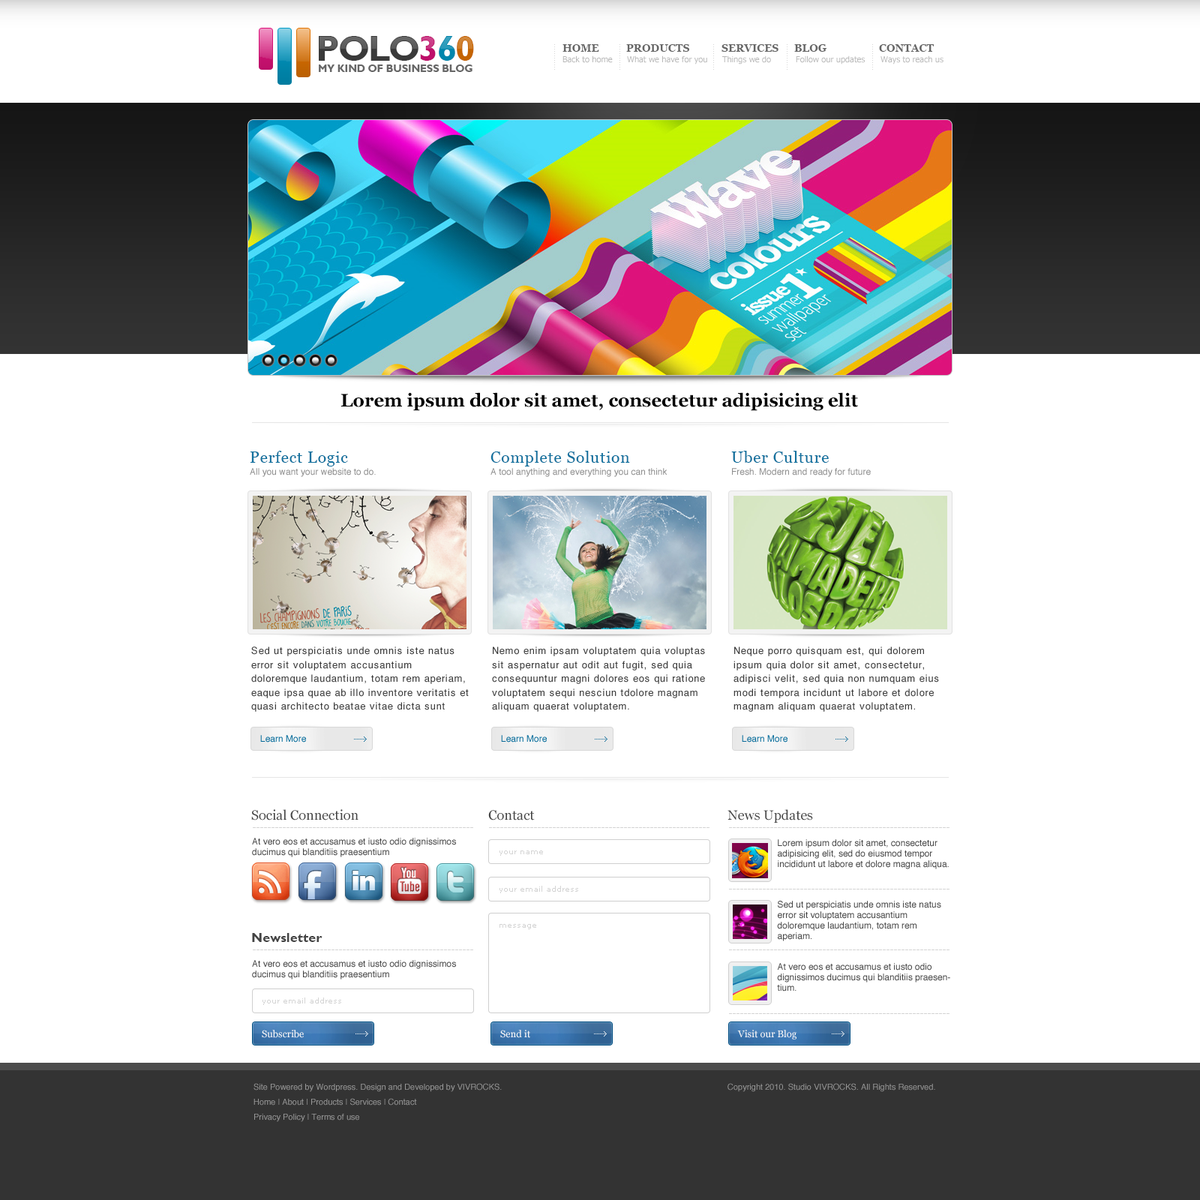
<style>
.page{position:relative;width:1200px;height:1200px;background:#ffffff}
.page>*{position:absolute;margin:0}
.t1{font:36px "GillSansMT-Bold";letter-spacing:-0.04em}
.t2{font:10.5px "Georgia-Bold";color:#666666}
.t3{font:10.3px "GillSansMT-Bold";color:#666666}
.t4{font:8.2px "Tahoma";color:#b7b7b7}
.t5{font:18px "Georgia-Bold";color:#000000}
.t6{font:15.8px "Georgia";letter-spacing:0.04em;color:#11719e}
.t7{font:9px "Helvetica";color:#8c8c8c}
.t8{font:9.8px/13.8px "Helvetica";letter-spacing:0.06em;color:#3e3e3e}
.t9{font:9px "Helvetica";color:#016999}
.t10{font:13.5px "Georgia";color:#444444}
.t11{font:9px "Verdana";color:#d3d3d3}
.t12{font:9px/10.5px "Helvetica";color:#444444}
.t13{font:7.5px "Verdana";color:#d4d4d4}
.t14{font:13.5px "GillSansMT-Bold";color:#444444}
.t15{font:9.8px "Georgia";color:#ffffff}
.t16{font:8.2px/7.5px "Helvetica";color:#999999}
.t17{font:8.2px "Helvetica";color:#999999}
</style>
<div class="page">
<p class="t1" style="left:319px;top:36px;width:155px;height:25px">POLO360</p>
<p class="t2" style="left:562px;top:44px;width:37px;height:8px">HOME</p>
<p class="t2" style="left:626px;top:44px;width:63px;height:8px">PRODUCTS</p>
<p class="t2" style="left:722px;top:44px;width:56px;height:8px">SERVICES</p>
<p class="t2" style="left:794px;top:44px;width:32px;height:8px">BLOG</p>
<p class="t2" style="left:879px;top:44px;width:55px;height:8px">CONTACT</p>
<p class="t3" style="left:319px;top:64px;width:153px;height:8px">MY KIND OF BUSINESS BLOG</p>
<p class="t4" style="left:562px;top:56px;width:51px;height:7px">Back to home</p>
<p class="t4" style="left:627px;top:56px;width:80px;height:8px">What we have for you</p>
<p class="t4" style="left:722px;top:56px;width:49px;height:8px">Things we do</p>
<p class="t4" style="left:796px;top:56px;width:69px;height:8px">Follow our updates</p>
<p class="t4" style="left:880px;top:56px;width:64px;height:8px">Ways to reach us</p>
<p class="t5" style="left:340px;top:392px;width:518px;height:19px">Lorem ipsum dolor sit amet, consectetur adipisicing elit</p>
<p class="t6" style="left:250px;top:451px;width:98px;height:15px">Perfect Logic</p>
<p class="t6" style="left:490px;top:451px;width:140px;height:15px">Complete Solution</p>
<p class="t6" style="left:731px;top:451px;width:98px;height:12px">Uber Culture</p>
<p class="t7" style="left:250px;top:468px;width:126px;height:9px">All you want your website to do.</p>
<p class="t7" style="left:490px;top:468px;width:177px;height:9px">A tool anything and everything you can think</p>
<p class="t7" style="left:732px;top:468px;width:139px;height:9px">Fresh. Modern and ready for future</p>
<p class="t8" style="left:251px;top:646px;width:218px;height:66px">Sed ut perspiciatis unde omnis iste natus error sit voluptatem accusantium doloremque laudantium, totam rem aperiam, eaque ipsa quae ab illo inventore veritatis et quasi architecto beatae vitae dicta sunt explicabo.</p>
<p class="t8" style="left:492px;top:646px;width:213px;height:66px">Nemo enim ipsam voluptatem quia voluptas sit aspernatur aut odit aut fugit, sed quia consequuntur magni dolores eos qui ratione voluptatem sequi nesciun tdolore magnam aliquam quaerat voluptatem.</p>
<p class="t8" style="left:734px;top:646px;width:205px;height:66px">Neque porro quisquam est, qui dolorem ipsum quia dolor sit amet, consectetur, adipisci velit, sed quia non numquam eius modi tempora incidunt ut labore et dolore magnam aliquam quaerat voluptatem.</p>
<p class="t9" style="left:260px;top:735px;width:46px;height:7px">Learn More</p>
<p class="t9" style="left:501px;top:735px;width:46px;height:7px">Learn More</p>
<p class="t9" style="left:742px;top:735px;width:46px;height:7px">Learn More</p>
<p class="t10" style="left:251px;top:809px;width:107px;height:11px">Social Connection</p>
<p class="t10" style="left:728px;top:809px;width:85px;height:14px">News Updates</p>
<p class="t10" style="left:488px;top:810px;width:47px;height:10px">Contact</p>
<p class="t11" style="left:253px;top:827px;width:220px;height:1px">-----------------------------------------------------------</p>
<p class="t11" style="left:489px;top:827px;width:221px;height:1px">-----------------------------------------------------------</p>
<p class="t11" style="left:729px;top:827px;width:221px;height:1px">-----------------------------------------------------------</p>
<p class="t12" style="left:252px;top:838px;width:204px;height:19px">At vero eos et accusamus et iusto odio dignissimos ducimus qui blanditiis praesentium</p>
<p class="t12" style="left:778px;top:839px;width:171px;height:30px">Lorem ipsum dolor sit amet, consectetur adipisicing elit, sed do eiusmod tempor incididunt ut labore et dolore magna aliqua.</p>
<p class="t13" style="left:500px;top:850px;width:43px;height:6px">your name</p>
<p class="t13" style="left:500px;top:886px;width:78px;height:7px">your email address</p>
<p class="t11" style="left:729px;top:889px;width:221px;height:1px">-----------------------------------------------------------</p>
<p class="t12" style="left:777px;top:901px;width:164px;height:40px">Sed ut perspiciatis unde omnis iste natus error sit voluptatem accusantium doloremque laudantium, totam rem aperiam.</p>
<p class="t13" style="left:500px;top:924px;width:36px;height:5px">message</p>
<p class="t14" style="left:252px;top:933px;width:70px;height:9px">Newsletter</p>
<p class="t11" style="left:253px;top:950px;width:220px;height:0px">-----------------------------------------------------------</p>
<p class="t11" style="left:729px;top:950px;width:221px;height:0px">-----------------------------------------------------------</p>
<p class="t12" style="left:252px;top:960px;width:204px;height:20px">At vero eos et accusamus et iusto odio dignissimos ducimus qui blanditiis praesentium</p>
<p class="t12" style="left:777px;top:963px;width:173px;height:29px">At vero eos et accusamus et iusto odio dignissimos ducimus qui blanditiis praesentium.</p>
<p class="t13" style="left:262px;top:998px;width:79px;height:7px">your email address</p>
<p class="t11" style="left:729px;top:1013px;width:221px;height:1px">-----------------------------------------------------------</p>
<p class="t15" style="left:262px;top:1030px;width:42px;height:8px">Subscribe</p>
<p class="t15" style="left:500px;top:1030px;width:30px;height:8px">Send it</p>
<p class="t15" style="left:737px;top:1030px;width:59px;height:10px">Visit our Blog</p>
<p class="t16" style="left:254px;top:1083px;width:248px;height:39px">Site Powered by Wordpress. Design and Developed by VIVROCKS.<br><br>Home | About | Products | Services | Contact<br><br>Privacy Policy | Terms of use</p>
<p class="t17" style="left:728px;top:1083px;width:207px;height:9px">Copyright 2010. Studio VIVROCKS. All Rights Reserved.</p>
</div>
